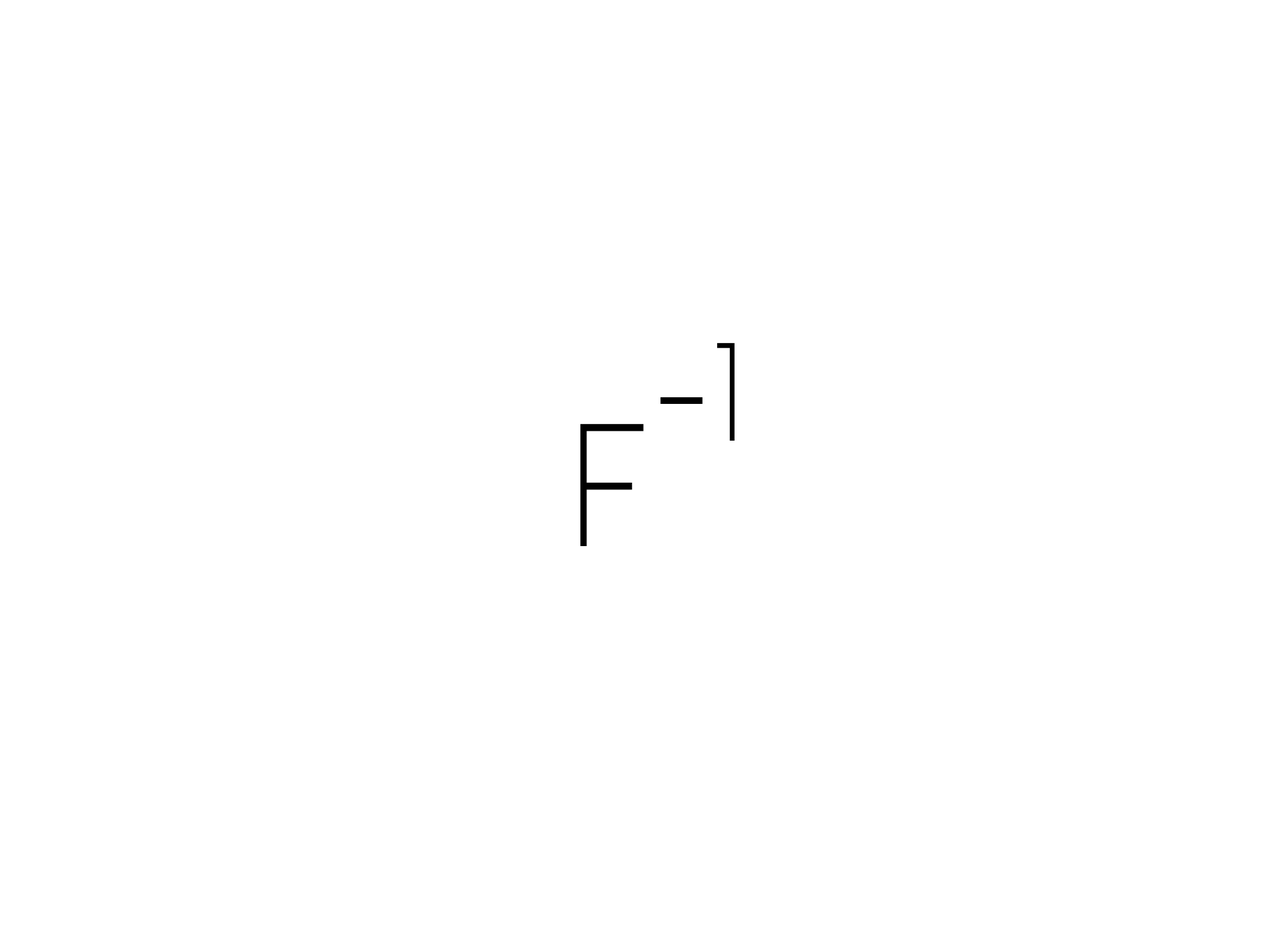
<style>
.page{position:relative;width:1261px;height:946px;background:#ffffff}
.page>*{position:absolute;margin:0}
.t1{font:138.9px "Alcubierre";color:#000000;scale:0.95 1}
.t2{font:162.1px "Alcubierre";color:#000000;scale:0.95 1}
.t3{font:173.6px "Alcubierre";color:#000000;scale:0.95 1}
</style>
<div class="page">
<p class="t1" style="left:717px;top:342px;width:18px;height:99px">1</p>
<p class="t2" style="left:660px;top:397px;width:43px;height:7px">-</p>
<p class="t3" style="left:580px;top:424px;width:64px;height:122px">F</p>
</div>
